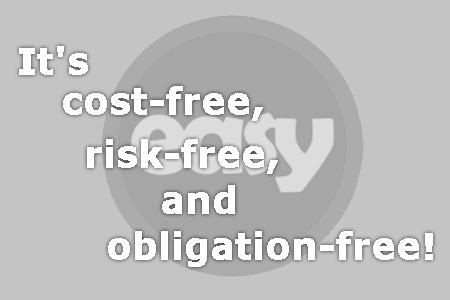
<style>
.page{position:relative;width:450px;height:300px;background:#c4c4c4}
.page>*{position:absolute;margin:0}
.t1{font:36px "Verdana-Bold";color:#ffffff;font-weight:bold}
</style>
<div class="page">
<p class="t1" style="left:19px;top:46px;width:69px;height:29px">It's</p>
<p class="t1" style="left:63px;top:86px;width:200px;height:35px">cost-free,</p>
<p class="t1" style="left:87px;top:139px;width:191px;height:35px">risk-free,</p>
<p class="t1" style="left:162px;top:185px;width:73px;height:29px">and</p>
<p class="t1" style="left:108px;top:231px;width:325px;height:36px">obligation-free!</p>
</div>
